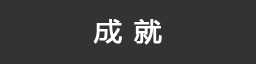
<style>
.page{position:relative;width:256px;height:64px;background:#333333}
.page>*{position:absolute;margin:0}
.t1{font:28px "MicrosoftYaHei";letter-spacing:0.4em;color:#ffffff;font-weight:bold}
</style>
<div class="page">
<p class="t1" style="left:93px;top:19px;width:69px;height:26px">成就</p>
</div>
